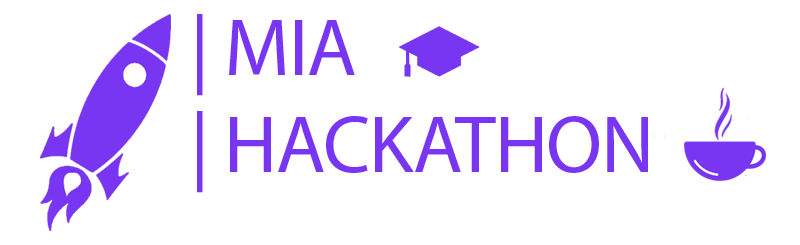
<style>
.page{position:relative;width:800px;height:245px;background:#ffffff}
.page>*{position:absolute;margin:0}
.t1{font:81.3px "MyriadPro-Regular";letter-spacing:-0.015em;color:#7836f3}
</style>
<div class="page">
<p class="t1" style="left:197px;top:14px;width:451px;height:179px">| MIA<br>| HACKATHON</p>
</div>
